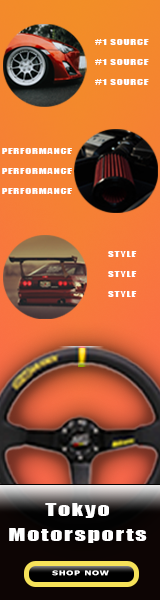
<style>
.page{position:relative;width:160px;height:600px}
.page>*{position:absolute;margin:0}
.t1{font:8px/20px "Impact";letter-spacing:0.06em;color:#ffffff;scale:1.4 1}
.t2{font:17px/25px "Impact";letter-spacing:0.075em;color:#ffffff;scale:1.4 1}
.t3{font:6.5px "Tahoma-Bold";letter-spacing:0.075em;color:#ffffff;scale:1.4 1}
</style>
<div class="page">
<p class="t1" style="left:95px;top:39px;width:54px;height:46px;text-align:center">#1 SOURCE<br>#1 SOURCE<br>#1 SOURCE</p>
<p class="t1" style="left:2px;top:148px;width:70px;height:46px;text-align:center">PERFORMANCE<br>PERFORMANCE<br>PERFORMANCE</p>
<p class="t1" style="left:108px;top:251px;width:29px;height:46px;text-align:center">STYLE<br>STYLE<br>STYLE</p>
<p class="t2" style="left:9px;top:503px;width:138px;height:40px;text-align:center">Tokyo<br>Motorsports</p>
<p class="t3" style="left:52px;top:570px;width:57px;height:6px">SHOP NOW</p>
</div>
